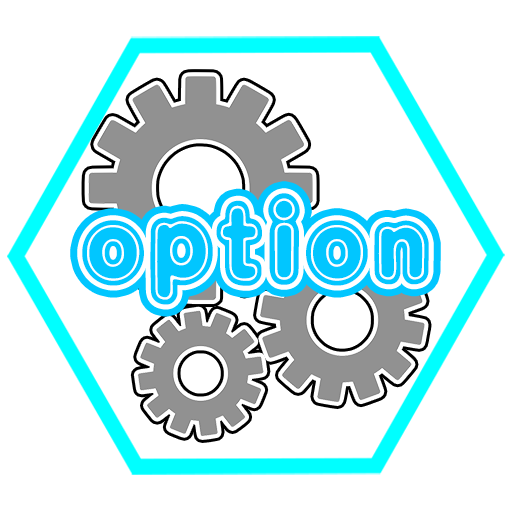
<style>
.page{position:relative;width:512px;height:512px;background:#ffffff}
.page>*{position:absolute;margin:0}
.t1{font:125px "DokiDokiFantasia";color:#01c6ff}
</style>
<div class="page">
<p class="t1" style="left:82px;top:193px;width:347px;height:112px">option</p>
</div>
